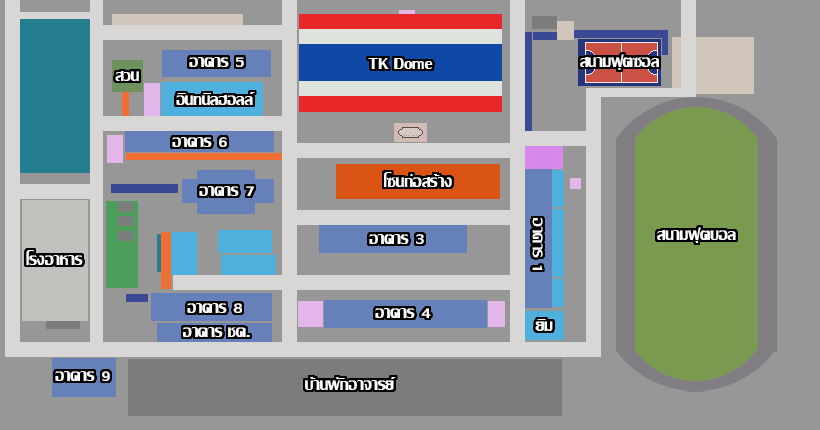
<style>
.page{position:relative;width:820px;height:430px;background:#979797}
.page>*{position:absolute;margin:0}
.t1{font:24px "LilyUPC";color:#ffffff}
</style>
<div class="page">
<p class="t1" style="left:580px;top:54px;width:79px;height:16px">สนามฟุตซอล</p>
<p class="t1" style="left:189px;top:57px;width:55px;height:10px">อาคาร 5</p>
<p class="t1" style="left:368px;top:58px;width:65px;height:11px">TK Dome</p>
<p class="t1" style="left:115px;top:71px;width:24px;height:10px">สวน</p>
<p class="t1" style="left:176px;top:92px;width:79px;height:13px">อินทนิลฮอลล์</p>
<p class="t1" style="left:172px;top:137px;width:55px;height:10px">อาคาร 6</p>
<p class="t1" style="left:384px;top:172px;width:68px;height:15px">โซนก่อสร้าง</p>
<p class="t1" style="left:199px;top:186px;width:55px;height:10px">อาคาร 7</p>
<p class="t1" style="left:532px;top:218px;width:11px;height:52px;rotate:90deg">อาคาร 1</p>
<p class="t1" style="left:657px;top:227px;width:79px;height:16px">สนามฟุตบอล</p>
<p class="t1" style="left:369px;top:234px;width:55px;height:10px">อาคาร 3</p>
<p class="t1" style="left:26px;top:250px;width:57px;height:15px">โรงอาหาร</p>
<p class="t1" style="left:187px;top:303px;width:55px;height:10px">อาคาร 8</p>
<p class="t1" style="left:375px;top:308px;width:56px;height:10px">อาคาร 4</p>
<p class="t1" style="left:183px;top:327px;width:67px;height:10px">อาคาร ชค.</p>
<p class="t1" style="left:535px;top:319px;width:18px;height:12px">ยิม</p>
<p class="t1" style="left:55px;top:371px;width:55px;height:10px">อาคาร 9</p>
<p class="t1" style="left:305px;top:377px;width:91px;height:13px">บ้านพักอาจารย์</p>
</div>
